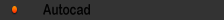
<style>
.page{position:relative;width:224px;height:20px;background:#333333}
.page>*{position:absolute;margin:0}
.t1{font:14.9px "ArialRoundedMTBold";color:#030303;scale:0.78 1}
</style>
<div class="page">
<p class="t1" style="left:43px;top:4px;width:47px;height:11px">Autocad</p>
</div>
